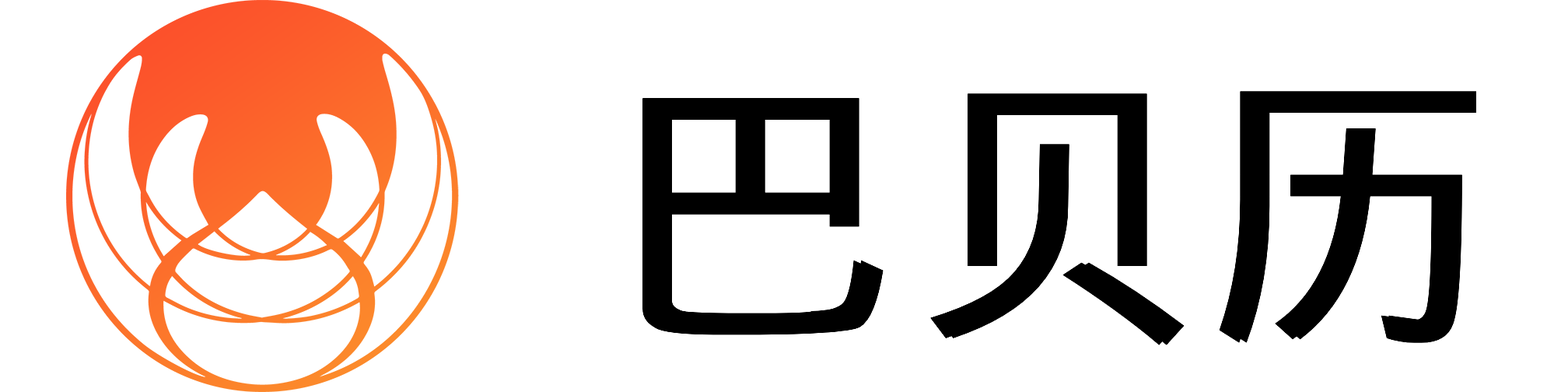
<style>
.page{position:relative;width:1568px;height:392px;background:#ffffff}
.page>*{position:absolute;margin:0}
.t1{font:288.4px "AdobeHeitiStd-Regular";letter-spacing:0.04em;color:#000000;font-weight:bold}
</style>
<div class="page">
<p class="t1" style="left:642px;top:91px;width:834px;height:254px">巴贝历</p>
</div>
